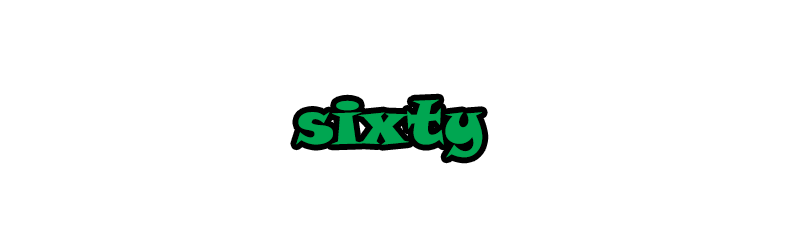
<style>
.page{position:relative;width:812px;height:249px;background:#ffffff}
.page>*{position:absolute;margin:0}
.t1{font:60px "SnapITC-Regular";color:#00a651}
</style>
<div class="page">
<p class="t1" style="left:296px;top:99px;width:187px;height:59px">sixty</p>
</div>
